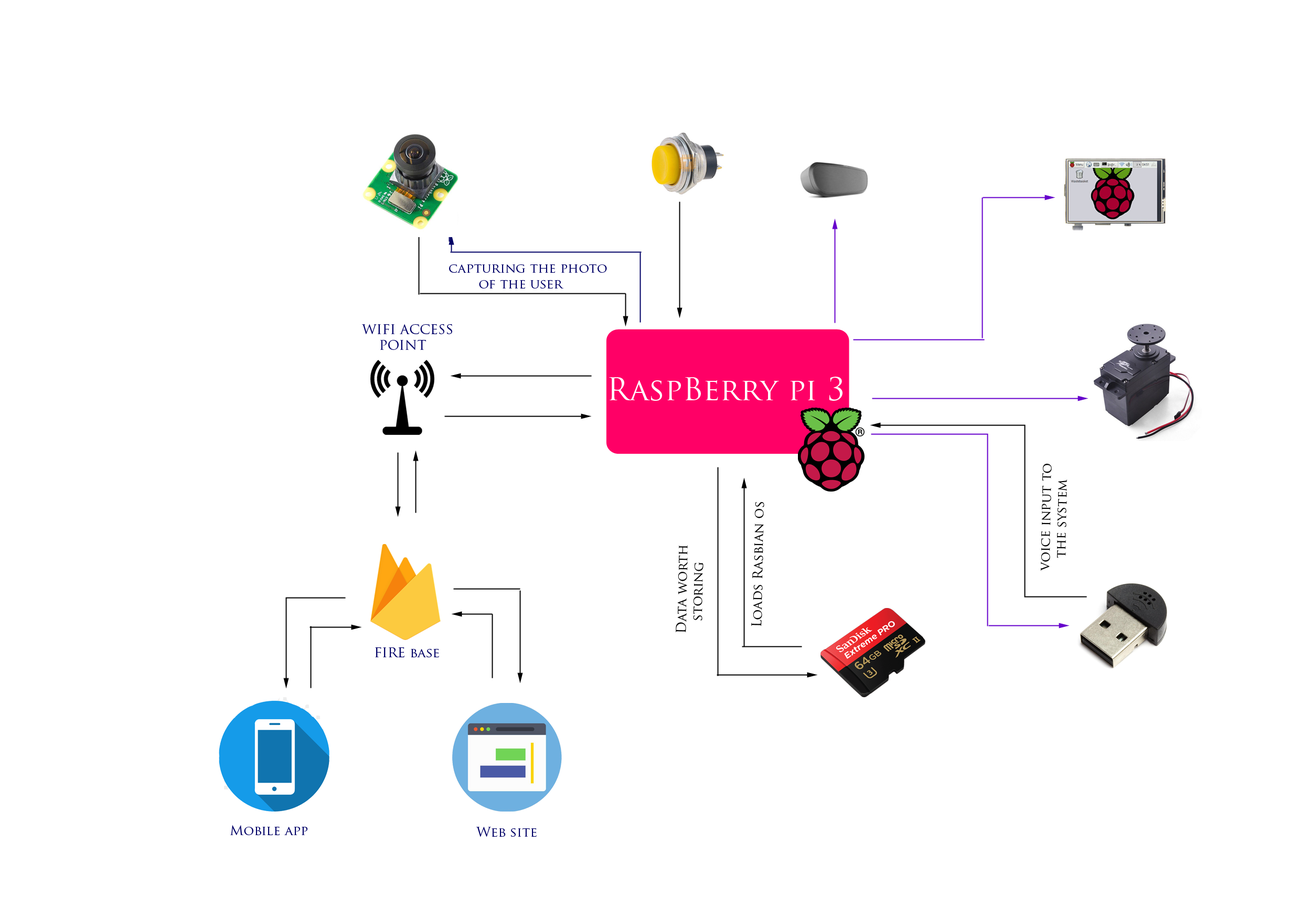
<style>
.page{position:relative;width:1301px;height:917px;background:#ffffff}
.page>*{position:absolute;margin:0}
.t1{font:13.1px "TrajanPro-Regular";color:#000066}
.t2{font:30.6px "TrajanPro-Regular";color:#ffffff}
.t3{font:13.1px "TrajanPro-Regular";color:#000000}
</style>
<div class="page">
<p class="t1" style="left:449px;top:264px;width:158px;height:24px">capturing the photo<br>       of the user</p>
<p class="t1" style="left:361px;top:324px;width:91px;height:26px">WIFI ACCESS<br>    POINT</p>
<p class="t2" style="left:609px;top:377px;width:233px;height:24px">RaspBerry pi 3</p>
<p class="t3" style="left:1040px;top:464px;width:27px;height:107px;rotate:-89deg">voice input to<br>   the system</p>
<p class="t3" style="left:751px;top:502px;width:13px;height:124px;rotate:-89deg">Loads Rasbian os</p>
<p class="t3" style="left:676px;top:545px;width:27px;height:88px;rotate:-89deg">Data worth<br>   storing</p>
<p class="t1" style="left:375px;top:647px;width:64px;height:10px">FIRE base</p>
<p class="t1" style="left:230px;top:825px;width:78px;height:10px">Mobile app</p>
<p class="t1" style="left:476px;top:827px;width:61px;height:10px">Web site</p>
</div>
